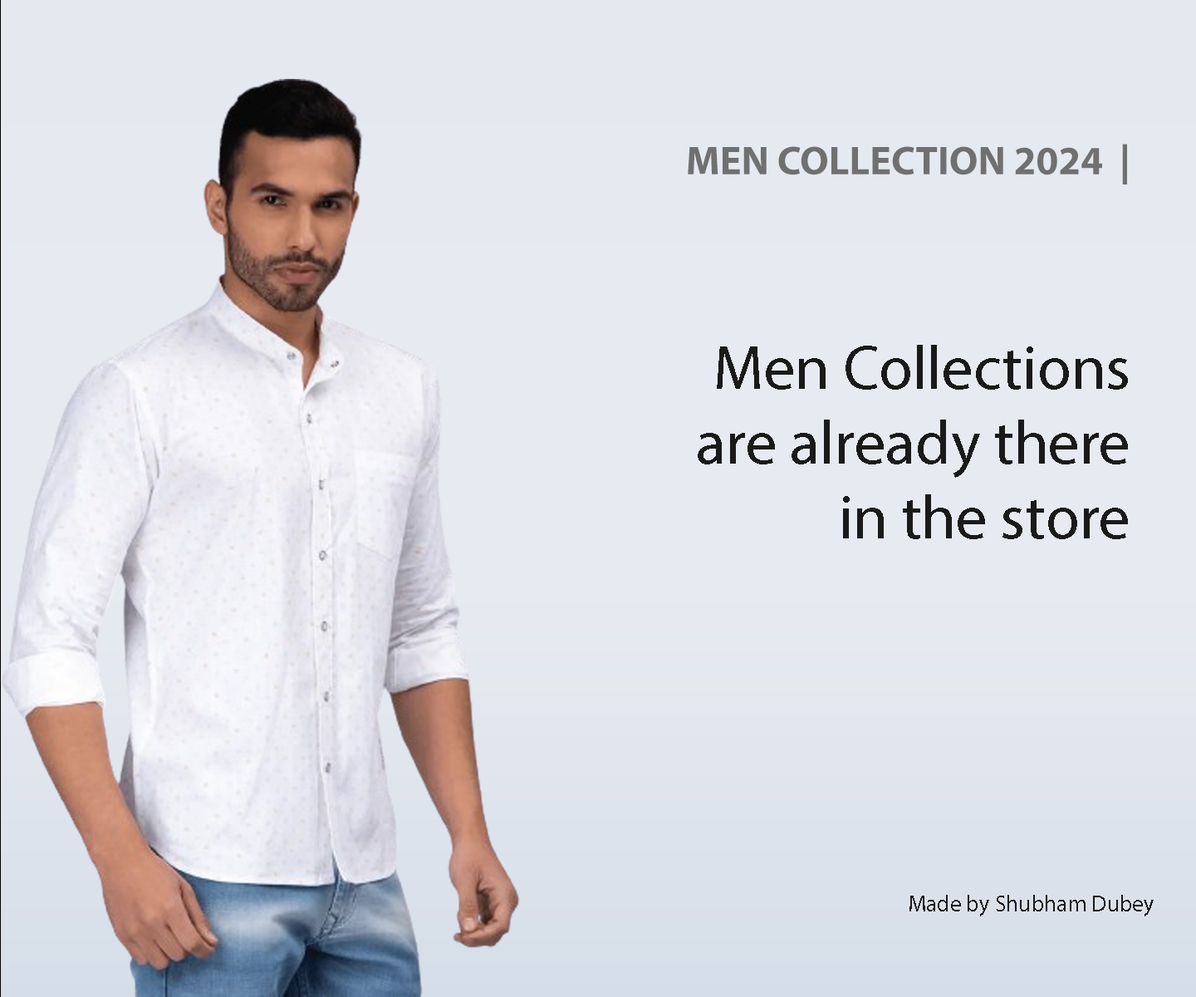
<style>
.page{position:relative;width:1196px;height:997px;background:#e7eaf1}
.page>*{position:absolute;margin:0}
.t1{font:40.2px "MyriadPro-Bold";color:#707070}
.t2{font:62.3px "MyriadPro-Regular";color:#1b1a1a}
.t3{font:22.9px "MyriadPro-Regular";color:#1b1a1a}
</style>
<div class="page">
<p class="t1" style="left:688px;top:144px;width:439px;height:40px">MEN COLLECTION 2024  |</p>
<p class="t2" style="left:698px;top:345px;width:430px;height:194px;text-align:right">Men Collections are already there in the store</p>
<p class="t3" style="left:910px;top:895px;width:244px;height:21px">Made by Shubham Dubey</p>
</div>
